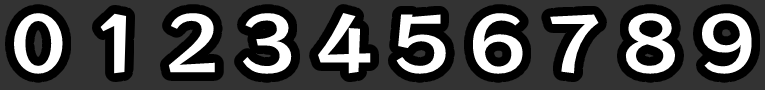
<style>
.page{position:relative;width:765px;height:90px;background:#333333}
.page>*{position:absolute;margin:0}
.t1{font:74.1px "RocknRollOne-Regular";color:#ffffff;scale:1.11 1}
</style>
<div class="page">
<p class="t1" style="left:14px;top:13px;width:49px;height:61px">0</p>
<p class="t1" style="left:100px;top:13px;width:27px;height:61px">1</p>
<p class="t1" style="left:168px;top:13px;width:47px;height:60px">2</p>
<p class="t1" style="left:243px;top:13px;width:49px;height:61px">3</p>
<p class="t1" style="left:318px;top:13px;width:53px;height:61px">4</p>
<p class="t1" style="left:396px;top:14px;width:50px;height:60px">5</p>
<p class="t1" style="left:473px;top:13px;width:50px;height:61px">6</p>
<p class="t1" style="left:550px;top:14px;width:49px;height:60px">7</p>
<p class="t1" style="left:625px;top:13px;width:50px;height:61px">8</p>
<p class="t1" style="left:702px;top:13px;width:50px;height:61px">9</p>
</div>
